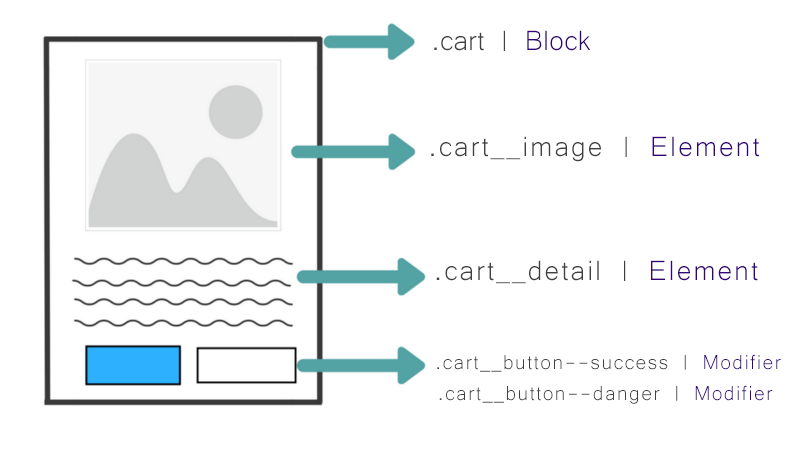
<style>
.page{position:relative;width:800px;height:450px;background:#ffffff}
.page>*{position:absolute;margin:0}
.t1{font:36px "Microsoft-Yi-Baiti";color:#404040}
.t2{font:36px "Microsoft-Yi-Baiti";color:#34027a}
.t3{font:36px "Microsoft-Yi-Baiti";letter-spacing:0.05em;color:#404040}
.t4{font:36px "Microsoft-Yi-Baiti";letter-spacing:0.05em;color:#34027a}
.t5{font:26px "Microsoft-Yi-Baiti";letter-spacing:0.05em;color:#404040}
.t6{font:26px "Microsoft-Yi-Baiti";letter-spacing:0.05em;color:#34027a}
</style>
<div class="page">
<p class="t1" style="left:434px;top:30px;width:157px;height:21px">.cart | <span class="t2">Block</span></p>
<p class="t3" style="left:431px;top:136px;width:328px;height:26px">.cart__image | <span class="t4">Element</span></p>
<p class="t3" style="left:436px;top:260px;width:322px;height:24px">.cart__detail | <span class="t4">Element</span></p>
<p class="t5" style="left:437px;top:354px;width:344px;height:18px">.cart__button--success | <span class="t6">Modifier</span></p>
<p class="t5" style="left:439px;top:385px;width:334px;height:19px">.cart__button--danger | <span class="t6">Modifier</span></p>
</div>
